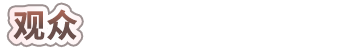
<style>
.page{position:relative;width:360px;height:50px;background:#ffffff}
.page>*{position:absolute;margin:0}
.t1{font:32px "SourceHanSansSC-Bold";color:#73534d;font-weight:bold}
</style>
<div class="page">
<p class="t1" style="left:13px;top:9px;width:64px;height:32px">观众</p>
</div>
